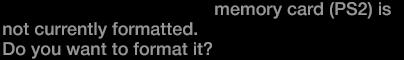
<style>
.page{position:relative;width:404px;height:60px;background:#000000}
.page>*{position:absolute;margin:0}
.t1{font:18px/20px "HelveticaNeue-Medium";color:#969696}
.t2{font:18px/20px "HelveticaNeue-Bold";color:#969696}
</style>
<div class="page">
<p class="t1" style="left:3px;top:2px;width:388px;height:57px"><span class="t2">MEMORY CARD SLOT 1</span> memory card (PS2) is<br>not currently formatted.<br>Do you want to format it?</p>
</div>
